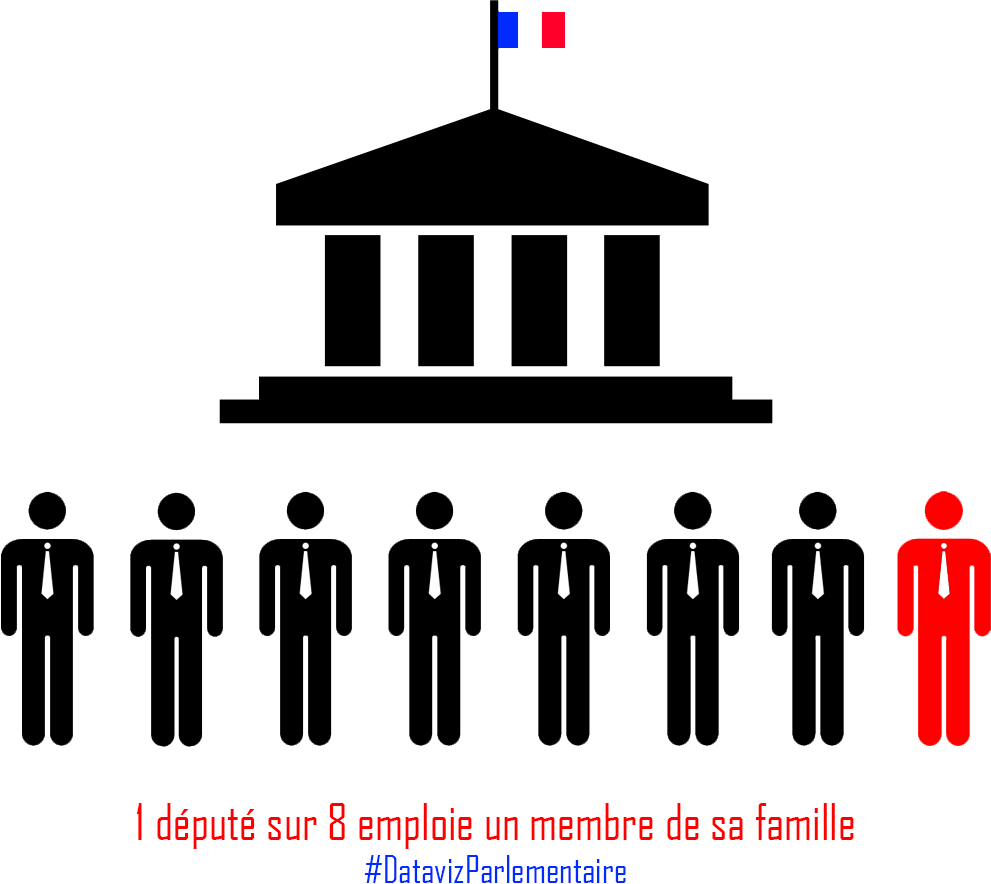
<style>
.page{position:relative;width:991px;height:884px;background:#ffffff}
.page>*{position:absolute;margin:0}
.t1{font:48px "AgencyFB-Reg";color:#ff0000}
.t2{font:36px "AgencyFB-Reg";color:#002bff}
</style>
<div class="page">
<p class="t1" style="left:136px;top:803px;width:718px;height:80px;text-align:center">1 député sur 8 emploie un membre de sa famille <br><span class="t2">#DatavizParlementaire</span></p>
</div>
